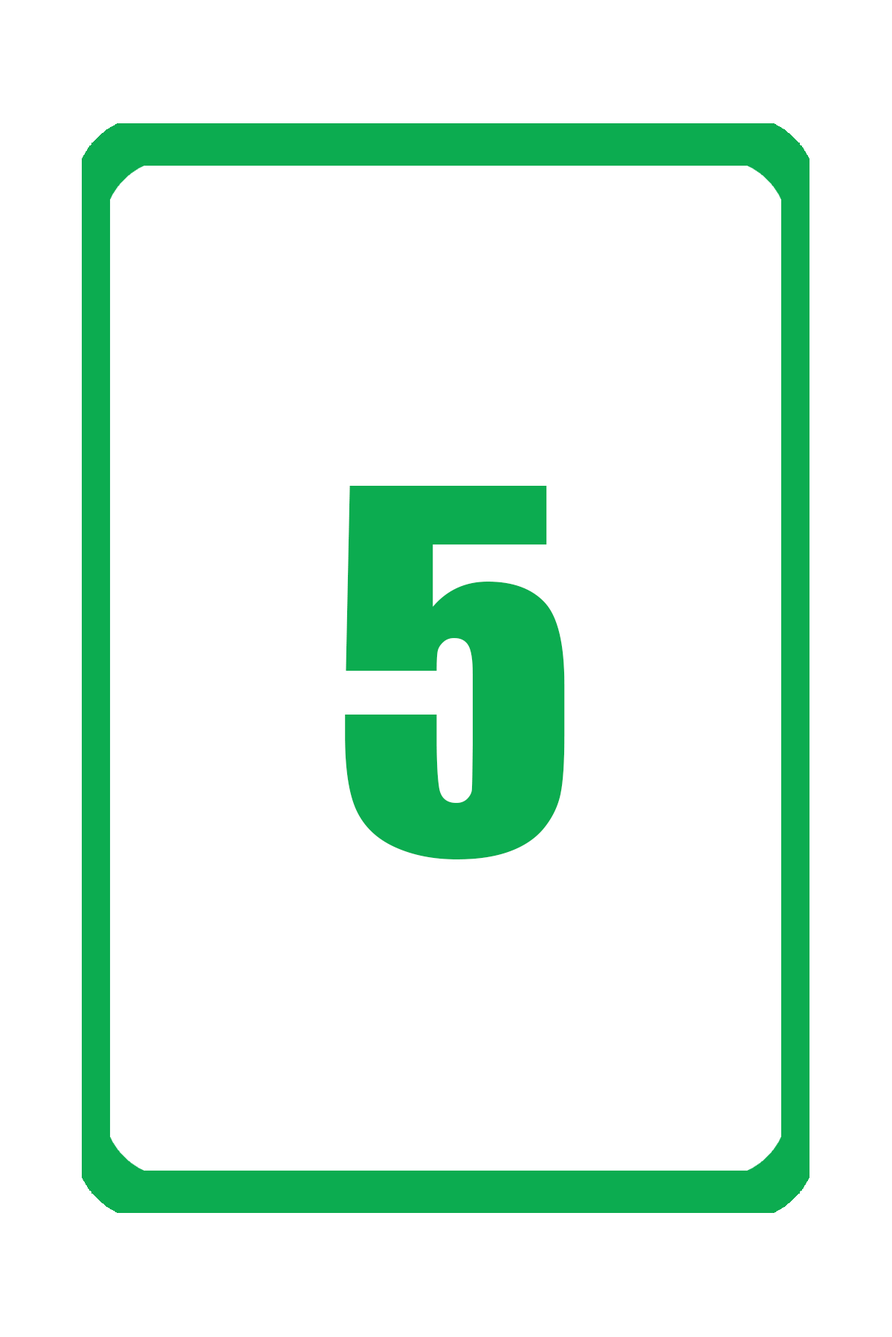
<style>
.page{position:relative;width:892px;height:1337px;background:#ffffff}
.page>*{position:absolute;margin:0}
.t1{font:464.4px "Impact";color:#0cac50}
</style>
<div class="page">
<p class="t1" style="left:345px;top:486px;width:220px;height:374px">5</p>
</div>
